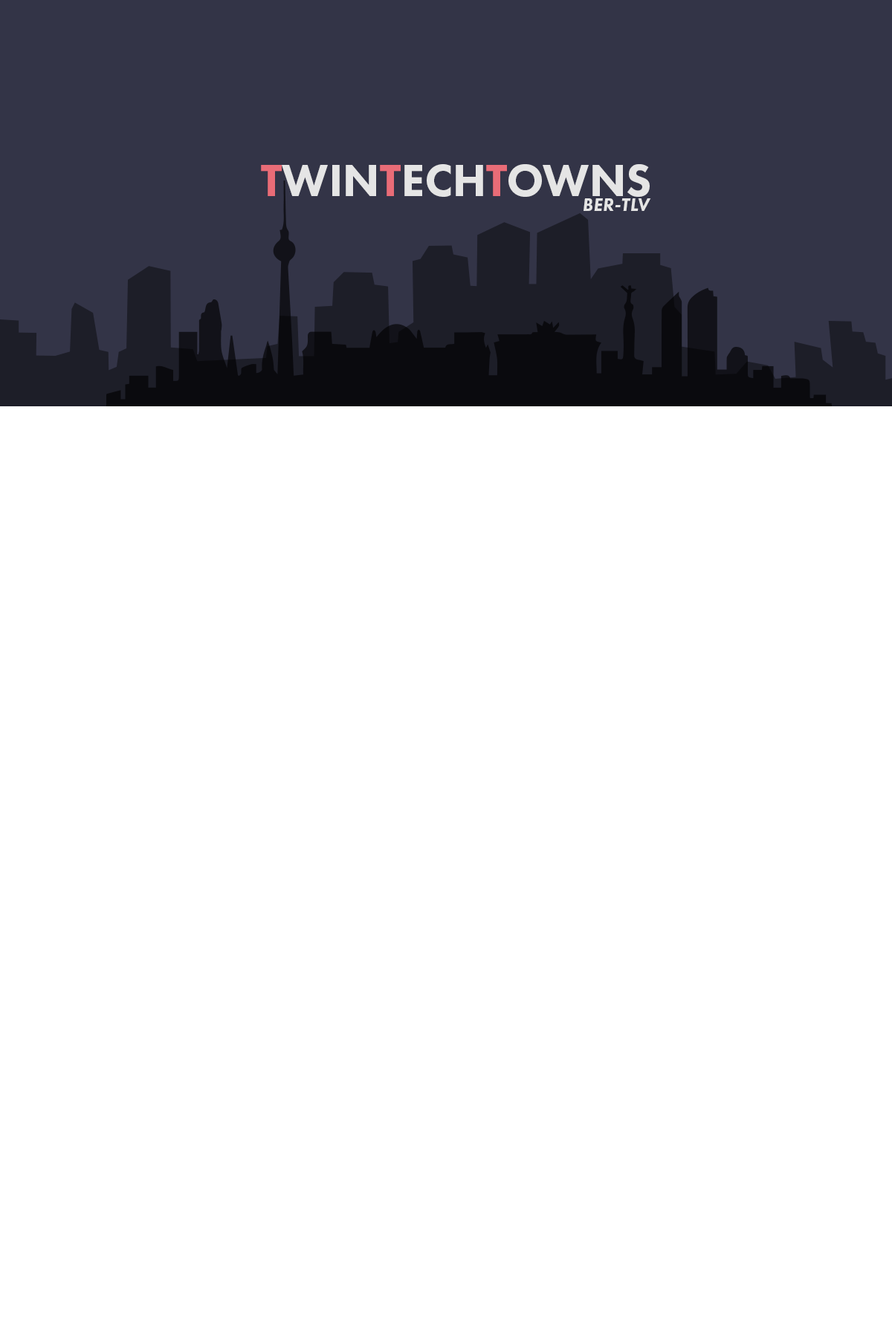
<style>
.page{position:relative;width:892px;height:1337px;background:#ffffff}
.page>*{position:absolute;margin:0}
.t1{font:46.4px "FuturaPT-Heavy";color:#e5e5e5}
.t2{font:46.4px "FuturaPT-Heavy";color:#e96c77}
.t3{font:18.6px "FuturaPT-HeavyObl";color:#e5e5e5}
</style>
<div class="page">
<p class="t1" style="left:261px;top:164px;width:388px;height:33px"><span class="t2">T</span>WIN<span class="t2">T</span>ECH<span class="t2">T</span>OWNS</p>
<p class="t3" style="left:583px;top:198px;width:68px;height:13px">BER-TLV</p>
</div>
